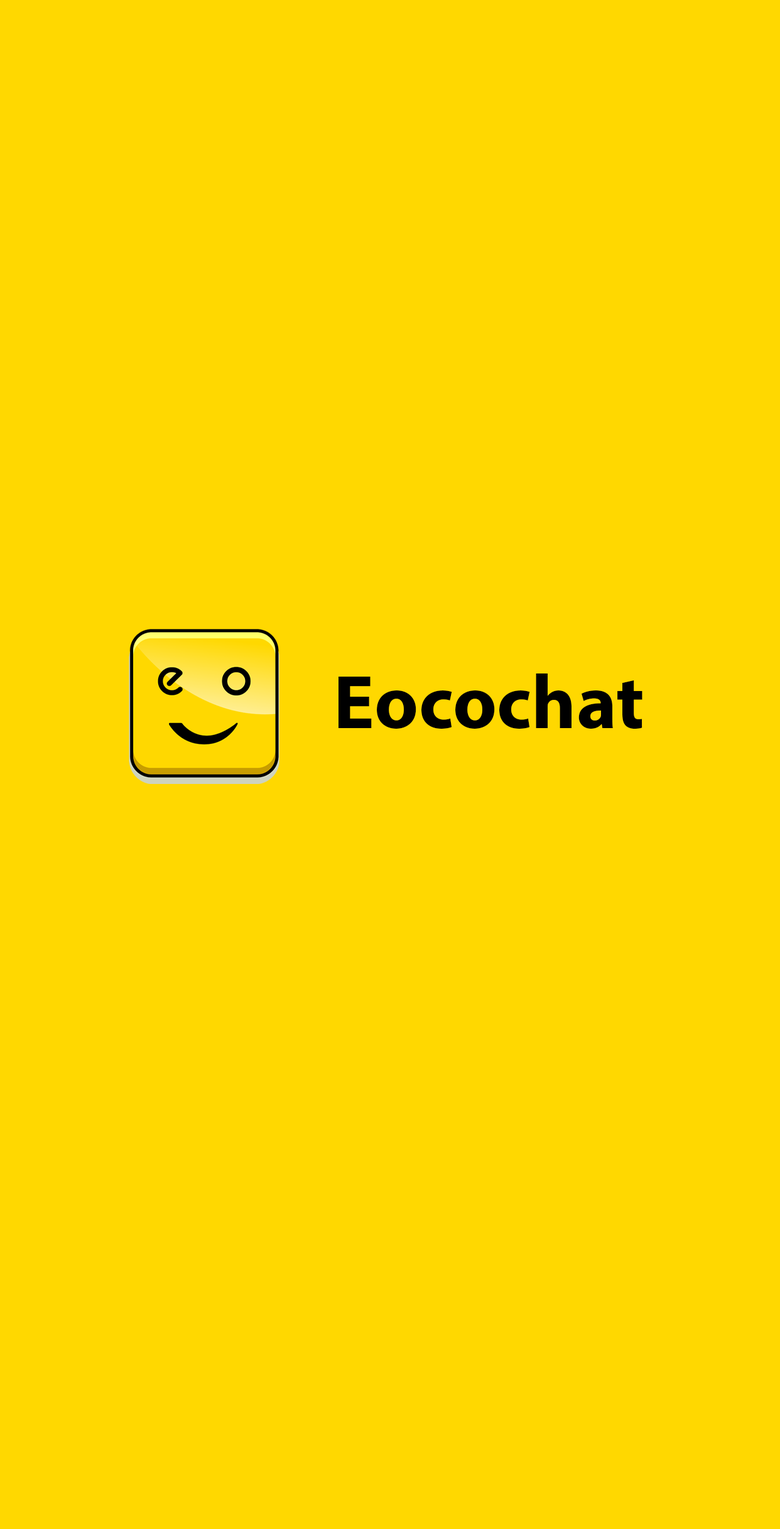
<style>
.page{position:relative;width:780px;height:1529px;background:#ffd800}
.page>*{position:absolute;margin:0}
.t1{font:76.6px "MyriadPro-Bold";color:#000000}
</style>
<div class="page">
<p class="t1" style="left:338px;top:674px;width:304px;height:55px">Eocochat</p>
</div>
